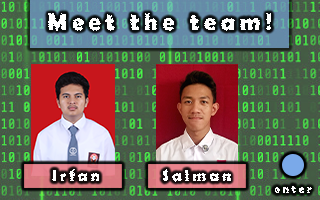
<style>
.page{position:relative;width:320px;height:200px}
.page>*{position:absolute;margin:0}
.t1{font:24px "BerlinSansFBDemi-Bold";letter-spacing:0.2em;color:#ffffff}
.t2{font:16px "BerlinSansFBDemi-Bold";letter-spacing:0.2em;color:#ffffff}
.t3{font:12px "BerlinSansFBDemi-Bold";letter-spacing:0.2em;color:#ffffff}
</style>
<div class="page">
<p class="t1" style="left:48px;top:13px;width:223px;height:18px">Meet the team!</p>
<p class="t2" style="left:52px;top:169px;width:47px;height:13px">Irfan</p>
<p class="t2" style="left:162px;top:169px;width:69px;height:13px">Salman</p>
<p class="t3" style="left:274px;top:185px;width:38px;height:8px">enter</p>
</div>
